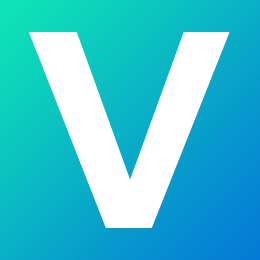
<style>
.page{position:relative;width:260px;height:260px;background:#ffffff}
.page>*{position:absolute;margin:0}
.t1{font:280px "Montserrat-SemiBold";color:#ffffff}
</style>
<div class="page">
<p class="t1" style="left:29px;top:32px;width:201px;height:196px">V</p>
</div>
